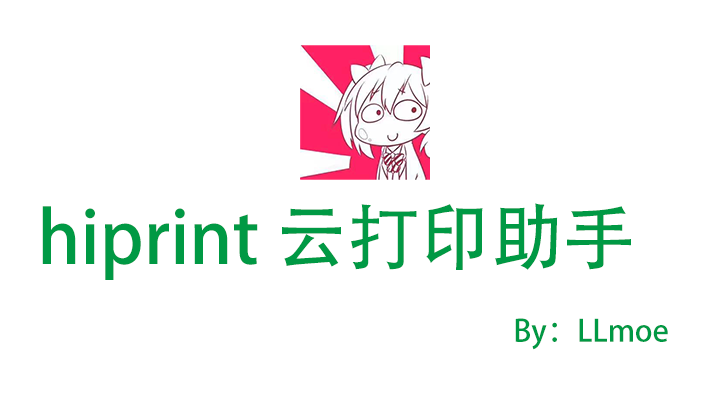
<style>
.page{position:relative;width:720px;height:405px;background:#ffffff}
.page>*{position:absolute;margin:0}
.t1{font:72px "AdobeHeitiStd-Regular";color:#009944}
.t2{font:30px "AdobeHeitiStd-Regular";color:#009944}
</style>
<div class="page">
<p class="t1" style="left:42px;top:203px;width:589px;height:77px">hiprint 云打印助手</p>
<p class="t2" style="left:515px;top:318px;width:153px;height:32px">By：LLmoe</p>
</div>
